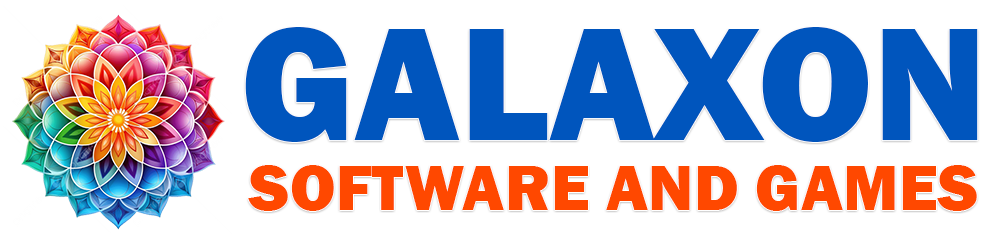
<style>
.page{position:relative;width:1000px;height:240px;background:#ffffff}
.page>*{position:absolute;margin:0}
.t1{font:66.4px/69.2px "FranklinGothic-Heavy";color:#ff4800}
.t2{font:166px/69.2px "FranklinGothic-Heavy";color:#0055bd}
</style>
<div class="page">
<p class="t1" style="left:245px;top:27px;width:733px;height:184px;text-align:center"><span class="t2">GALAXON<br></span>SOFTWARE AND GAMES</p>
</div>
